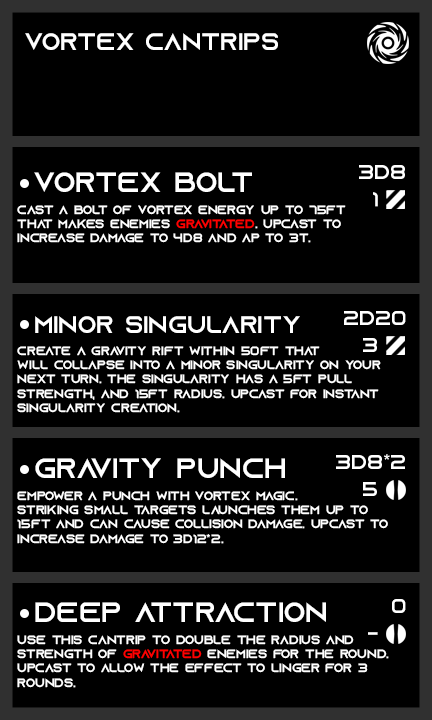
<style>
.page{position:relative;width:432px;height:720px;background:#000000}
.page>*{position:absolute;margin:0}
.t1{font:24px "AzonixRegular";color:#ffffff}
.t2{font:28px "AzonixRegular";color:#ffffff}
.t3{font:20px "AzonixRegular";color:#ffffff}
.t4{font:12px "AzonixRegular";color:#ffffff}
.t5{font:12px "AzonixRegular";color:#ff0000}
</style>
<div class="page">
<p class="t1" style="left:25px;top:33px;width:253px;height:17px">vortex cantrips</p>
<p class="t2" style="left:34px;top:172px;width:218px;height:20px">vortex bolt</p>
<p class="t3" style="left:359px;top:165px;width:46px;height:14px">3d8</p>
<p class="t3" style="left:373px;top:192px;width:5px;height:15px">1</p>
<p class="t4" style="left:17px;top:205px;width:329px;height:38px">cast a bolt of vortex energy up to 75ft<br>that makes enemies <span class="t5">gravitated</span>. upcast to <br>increase damage to 4d8 and ap to 3t.</p>
<p class="t1" style="left:35px;top:316px;width:265px;height:17px">minor singularity</p>
<p class="t3" style="left:344px;top:311px;width:62px;height:14px">2d20</p>
<p class="t3" style="left:363px;top:338px;width:14px;height:14px">3</p>
<p class="t4" style="left:17px;top:346px;width:364px;height:67px">create a gravity rift within 50ft that <br>will collapse into a minor singularity on your <br>next turn. the singularity has a 5ft pull <br>strength, and 15ft radius. upcast for instant<br>singularity creation.</p>
<p class="t2" style="left:35px;top:458px;width:250px;height:20px">gravity punch</p>
<p class="t3" style="left:336px;top:454px;width:69px;height:15px">3d8*2</p>
<p class="t3" style="left:363px;top:482px;width:14px;height:14px">5</p>
<p class="t4" style="left:17px;top:491px;width:371px;height:53px">empower a punch with vortex magic. <br>striking small targets launches them up to<br>15ft and can cause collision damage. upcast to <br>increase damage to 3d12*2.</p>
<p class="t2" style="left:35px;top:602px;width:291px;height:20px">deep attraction</p>
<p class="t3" style="left:392px;top:599px;width:14px;height:14px">0</p>
<p class="t4" style="left:17px;top:635px;width:372px;height:53px">use this cantrip to double the radius and<br>strength of <span class="t5">gravitated</span> enemies for the round.<br>upcast to allow the effect to linger for 3<br>rounds.</p>
<p class="t3" style="left:368px;top:632px;width:10px;height:3px">-</p>
</div>
